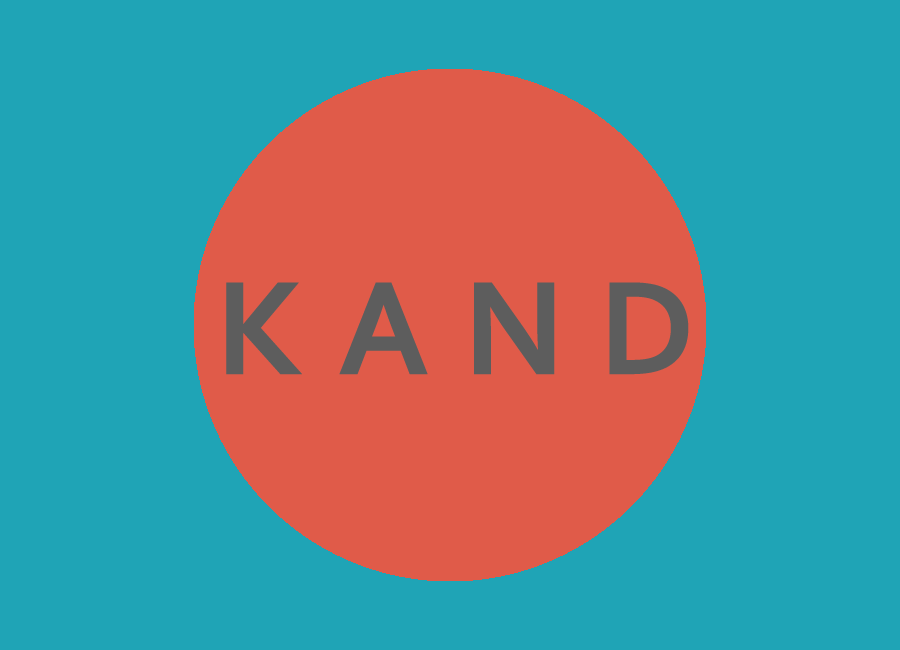
<style>
.page{position:relative;width:900px;height:650px;background:#1fa4b6}
.page>*{position:absolute;margin:0}
.t1{font:140px "Corbel-Bold";letter-spacing:0.24em;color:#5d5d5d}
</style>
<div class="page">
<p class="t1" style="left:226px;top:282px;width:463px;height:93px">KAND</p>
</div>
